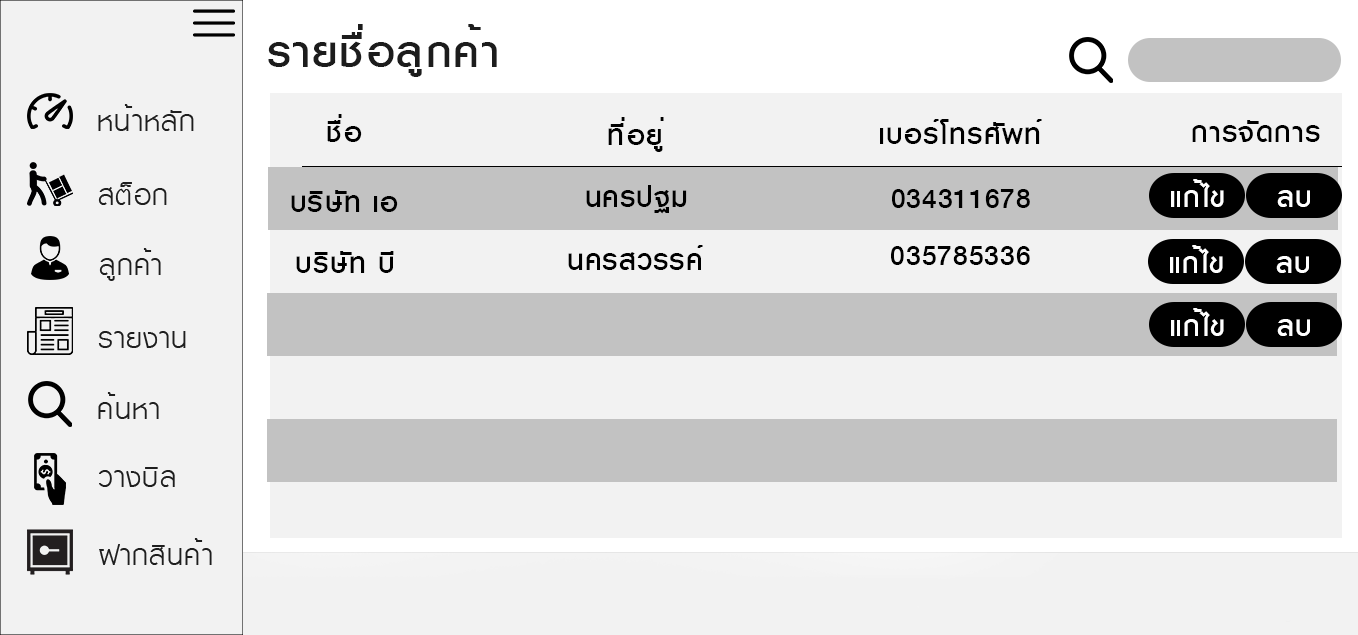
<style>
.page{position:relative;width:1358px;height:635px;background:#f2f2f2}
.page>*{position:absolute;margin:0}
.t1{font:61.6px "KittithadaMedium65P";letter-spacing:0.025em;color:#1c1c1c}
.t2{font:40px "KittithadaMedium65P";letter-spacing:0.025em;color:#000000}
.t3{font:40px "KittithadaMedium65P";letter-spacing:0.025em;color:#ffffff}
</style>
<div class="page">
<p class="t1" style="left:268px;top:24px;width:229px;height:53px">รายชื่อลูกค้า</p>
<p class="t2" style="left:327px;top:114px;width:35px;height:28px">ชื่อ</p>
<p class="t2" style="left:608px;top:117px;width:56px;height:35px">ที่อยู่</p>
<p class="t2" style="left:880px;top:119px;width:162px;height:25px">เบอร์โทรศัพท์</p>
<p class="t2" style="left:1192px;top:120px;width:128px;height:22px">การจัดการ</p>
<p class="t2" style="left:586px;top:185px;width:101px;height:29px">นครปฐม</p>
<p class="t3" style="left:1171px;top:179px;width:53px;height:28px">แก้ไข</p>
<p class="t2" style="left:291px;top:190px;width:107px;height:22px">บริษัท เอ</p>
<p class="t2" style="left:892px;top:189px;width:138px;height:19px">034311678</p>
<p class="t3" style="left:1277px;top:190px;width:33px;height:17px">ลบ</p>
<p class="t2" style="left:568px;top:245px;width:135px;height:25px">นครสวรรค์</p>
<p class="t2" style="left:891px;top:246px;width:139px;height:19px">035785336</p>
<p class="t3" style="left:1170px;top:245px;width:53px;height:28px">แก้ไข</p>
<p class="t2" style="left:296px;top:251px;width:98px;height:22px">บริษัท บี</p>
<p class="t3" style="left:1276px;top:256px;width:33px;height:17px">ลบ</p>
<p class="t3" style="left:1171px;top:308px;width:53px;height:28px">แก้ไข</p>
<p class="t3" style="left:1277px;top:319px;width:33px;height:17px">ลบ</p>
</div>
